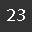
<style>
.page{position:relative;width:32px;height:32px;background:#333333}
.page>*{position:absolute;margin:0}
.t1{font:17.8px "MyriadPro-Regular";color:#ffffff;scale:1.12 1}
</style>
<div class="page">
<p class="t1" style="left:7px;top:9px;width:18px;height:12px">23</p>
</div>
